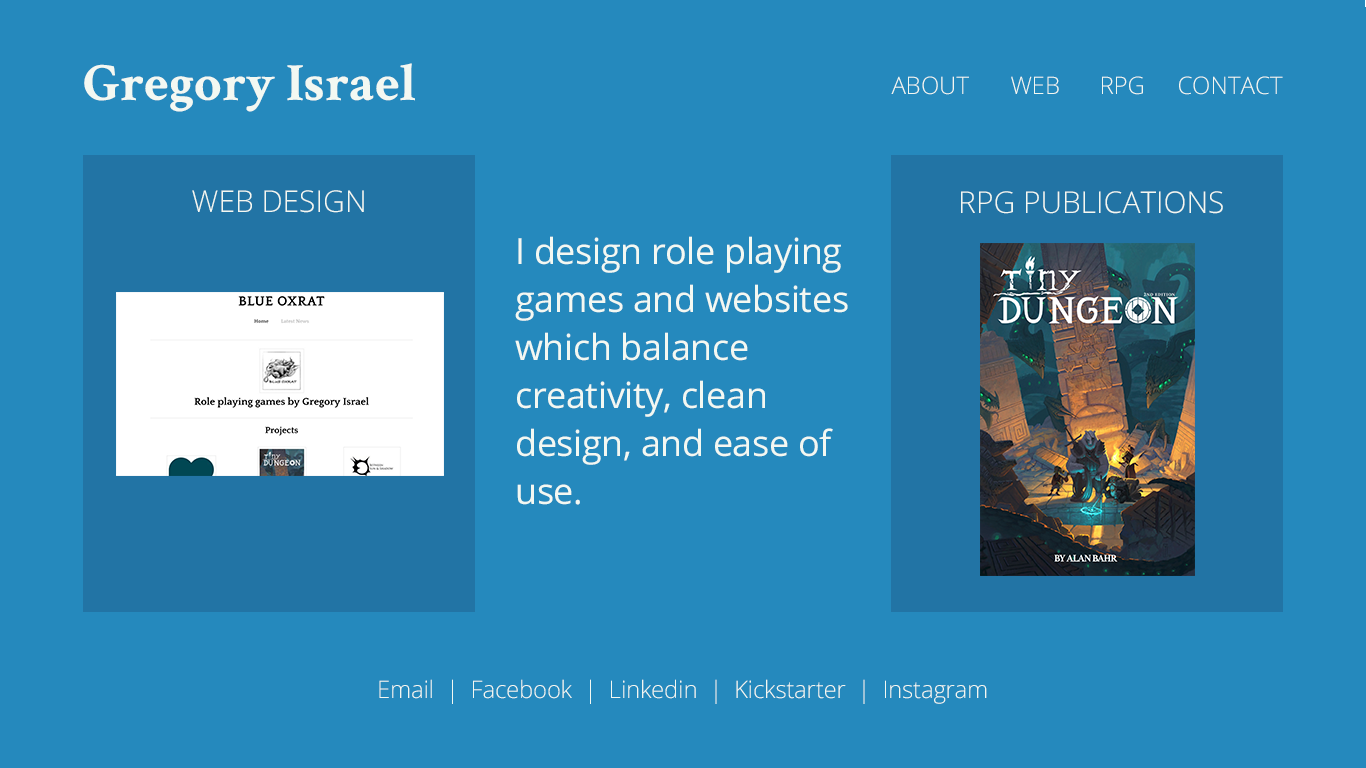
<style>
.page{position:relative;width:1366px;height:768px;background:#2589bd}
.page>*{position:absolute;margin:0}
.t1{font:54px "CrimsonText-Bold";color:#f3f8f2}
.t2{font:24px "OpenSans-Light";color:#f3f8f2}
.t3{font:30px "OpenSans-Light";color:#f3f8f2}
.t4{font:36px/48px "OpenSans-Regular";letter-spacing:-0.01em;color:#f3f8f2}
.t5{font:36px/48px "OpenSans-Regular";letter-spacing:-0.01em;color:#f3f8f2;text-transform:uppercase}
.t6{font:24px "OpenSans-Light";letter-spacing:-0.01em;color:#f3f8f2}
</style>
<div class="page">
<p class="t1" style="left:84px;top:63px;width:331px;height:49px">Gregory Israel</p>
<p class="t2" style="left:891px;top:76px;width:78px;height:19px">ABOUT</p>
<p class="t2" style="left:1011px;top:76px;width:48px;height:18px">WEB</p>
<p class="t2" style="left:1102px;top:76px;width:41px;height:19px">RPG</p>
<p class="t2" style="left:1179px;top:76px;width:104px;height:19px">CONTACT</p>
<p class="t3" style="left:192px;top:190px;width:172px;height:23px">WEB DESIGN</p>
<p class="t3" style="left:961px;top:191px;width:262px;height:23px">RPG PUBLICATIONS</p>
<p class="t4" style="left:515px;top:236px;width:333px;height:269px"><span class="t5">I </span>design role playing games and websites which balance creativity, clean design, and ease of use.</p>
<p class="t6" style="left:379px;top:679px;width:608px;height:25px">Email  |  Facebook  |  Linkedin  |  Kickstarter  |  Instagram</p>
</div>
